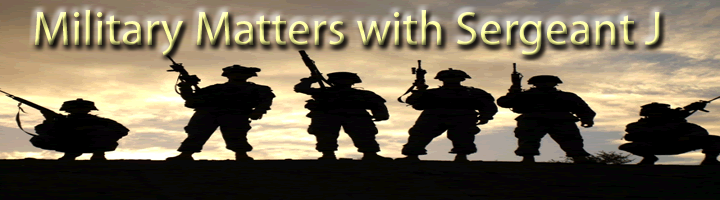
<style>
.page{position:relative;width:720px;height:200px}
.page>*{position:absolute;margin:0}
.t1{font:48px "MyriadPro-Regular"}
</style>
<div class="page">
<p class="t1" style="left:35px;top:10px;width:625px;height:46px">Military Matters with Sergeant J</p>
</div>
